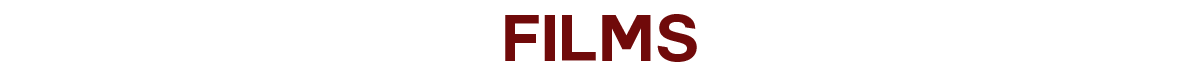
<style>
.page{position:relative;width:1200px;height:71px;background:#ffffff}
.page>*{position:absolute;margin:0}
.t1{font:64.6px "Couture-Bold";color:#700a0a}
</style>
<div class="page">
<p class="t1" style="left:505px;top:14px;width:192px;height:48px">FILMS</p>
</div>
